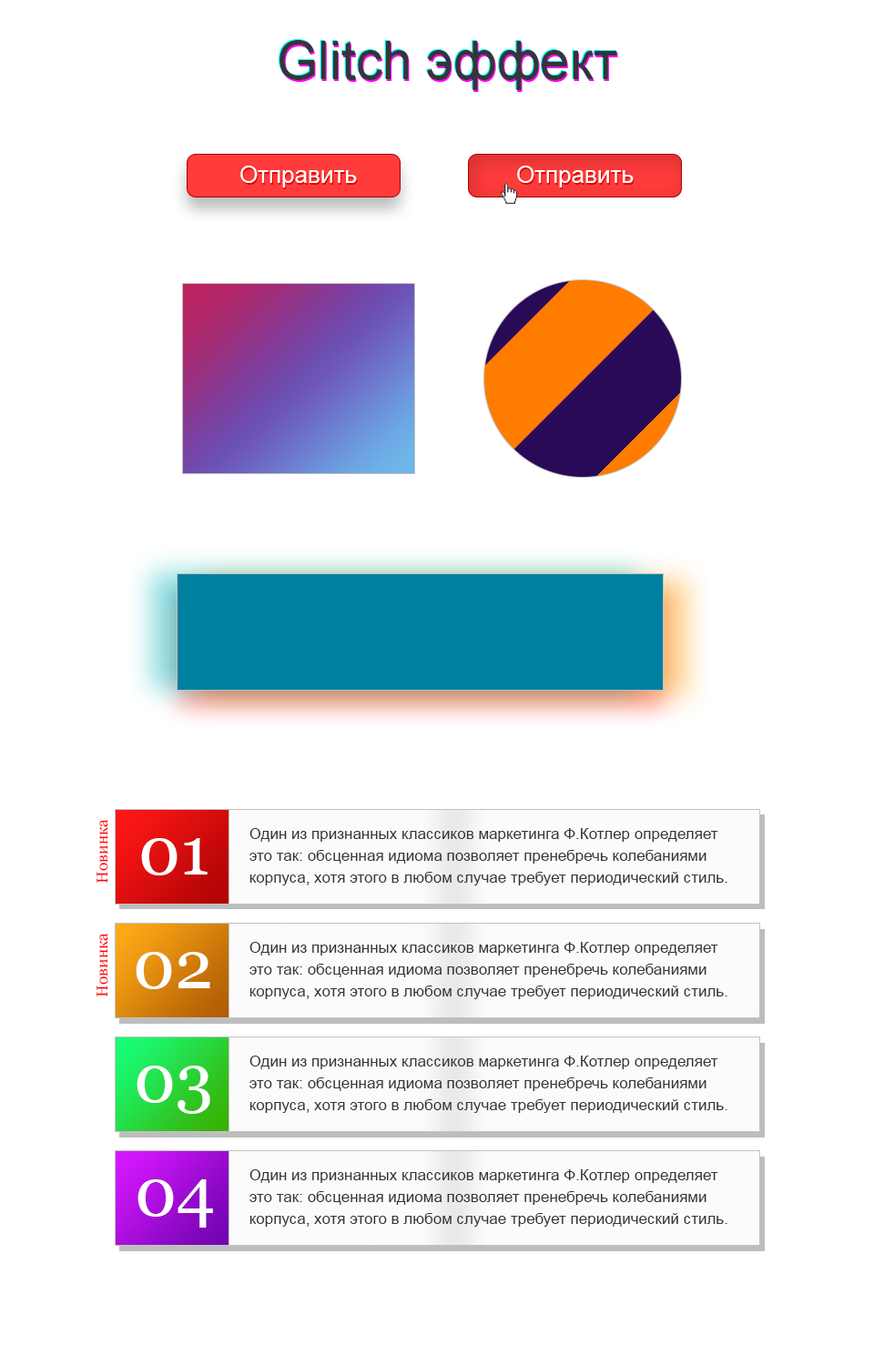
<style>
.page{position:relative;width:874px;height:1365px;background:#ffffff}
.page>*{position:absolute;margin:0}
.t1{font:52.8px "ArialMT";color:#353535}
.t2{font:23.7px "ArialMT";color:#ffffff}
.t3{font:15.5px "Georgia";color:#ff0000}
.t4{font:15.5px/21.8px "ArialMT";color:#353535}
.t5{font:68.2px "Georgia";color:#ffffff}
</style>
<div class="page">
<p class="t1" style="left:279px;top:40px;width:338px;height:50px">Glitch эффект</p>
<p class="t2" style="left:240px;top:166px;width:117px;height:21px">Отправить</p>
<p class="t2" style="left:517px;top:166px;width:116px;height:21px">Отправить</p>
<p class="t3" style="left:96px;top:819px;width:12px;height:64px;rotate:-90deg">Новинка</p>
<p class="t4" style="left:249px;top:828px;width:478px;height:57px">Один из признанных классиков маркетинга Ф.Котлер определяет это так: обсценная идиома позволяет пренебречь колебаниями корпуса, хотя этого в любом случае требует периодический стиль.</p>
<p class="t5" style="left:141px;top:838px;width:66px;height:37px">01</p>
<p class="t3" style="left:96px;top:933px;width:12px;height:63px;rotate:-90deg">Новинка</p>
<p class="t4" style="left:249px;top:942px;width:478px;height:57px">Один из признанных классиков маркетинга Ф.Котлер определяет это так: обсценная идиома позволяет пренебречь колебаниями корпуса, хотя этого в любом случае требует периодический стиль.</p>
<p class="t5" style="left:136px;top:952px;width:74px;height:37px">02</p>
<p class="t4" style="left:249px;top:1056px;width:478px;height:57px">Один из признанных классиков маркетинга Ф.Котлер определяет это так: обсценная идиома позволяет пренебречь колебаниями корпуса, хотя этого в любом случае требует периодический стиль.</p>
<p class="t5" style="left:136px;top:1066px;width:74px;height:48px">03</p>
<p class="t4" style="left:249px;top:1169px;width:478px;height:58px">Один из признанных классиков маркетинга Ф.Котлер определяет это так: обсценная идиома позволяет пренебречь колебаниями корпуса, хотя этого в любом случае требует периодический стиль.</p>
<p class="t5" style="left:137px;top:1179px;width:76px;height:49px">04</p>
</div>
